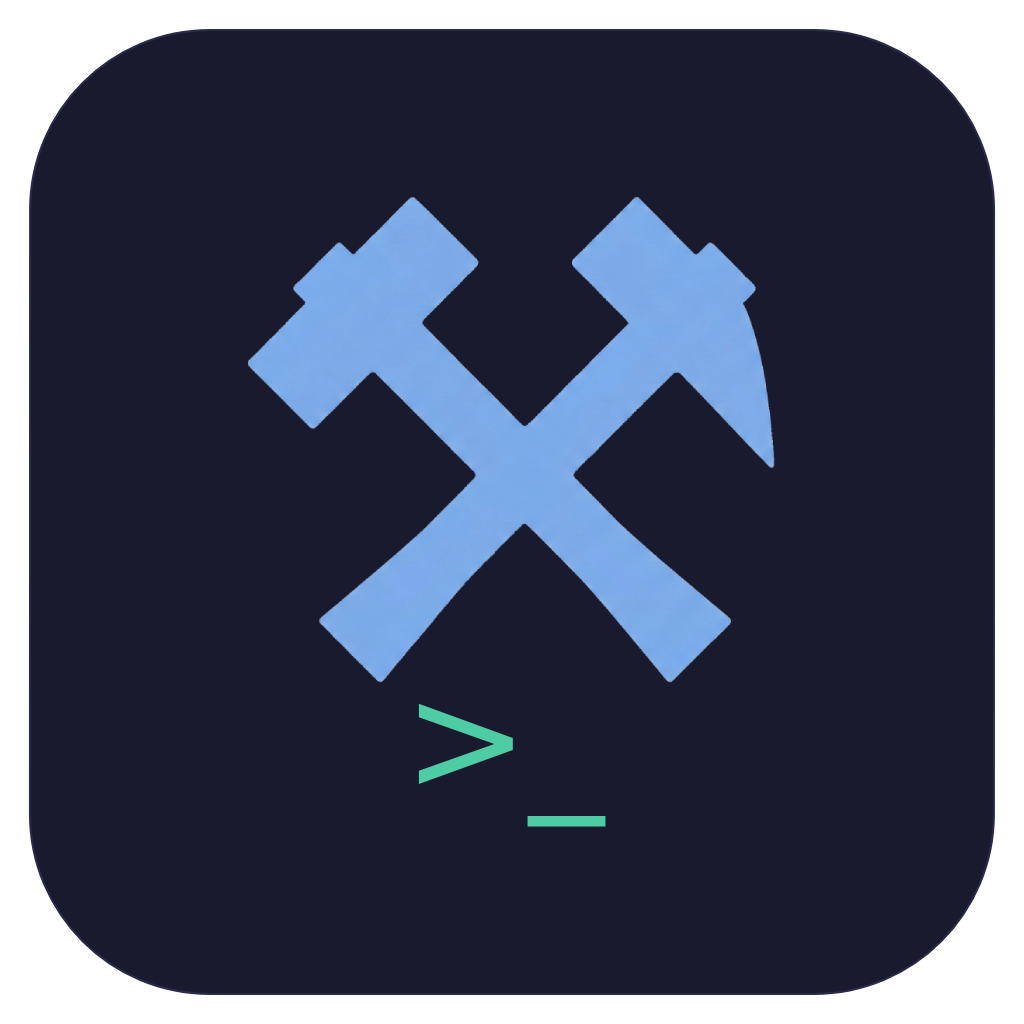
<style>
.page{position:relative;width:1024px;height:1024px;background:#1a1a2e}
.page>*{position:absolute;margin:0}
.t1{font:150px "'SF Mono'";color:#4ecca3}
</style>
<div class="page">
<p class="t1" style="left:418px;top:703px;width:188px;height:124px">&gt;_</p>
</div>
